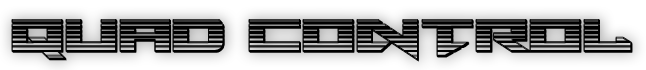
<style>
.page{position:relative;width:646px;height:70px}
.page>*{position:absolute;margin:0}
.t1{font:60px "TarrgetChrome";color:#000000}
</style>
<div class="page">
<p class="t1" style="left:11px;top:19px;width:622px;height:42px">Quad Control</p>
<p class="t1" style="left:11px;top:20px;width:622px;height:42px">Quad Control</p>
</div>
